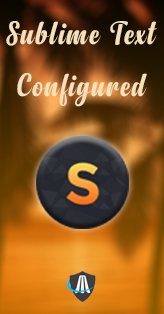
<style>
.page{position:relative;width:164px;height:314px}
.page>*{position:absolute;margin:0}
.t1{font:33.3px "Anydore";letter-spacing:0.05em;color:#f4e0bb}
</style>
<div class="page">
<p class="t1" style="left:6px;top:21px;width:151px;height:25px">Sublime Text</p>
<p class="t1" style="left:17px;top:73px;width:130px;height:34px">Configured</p>
</div>
